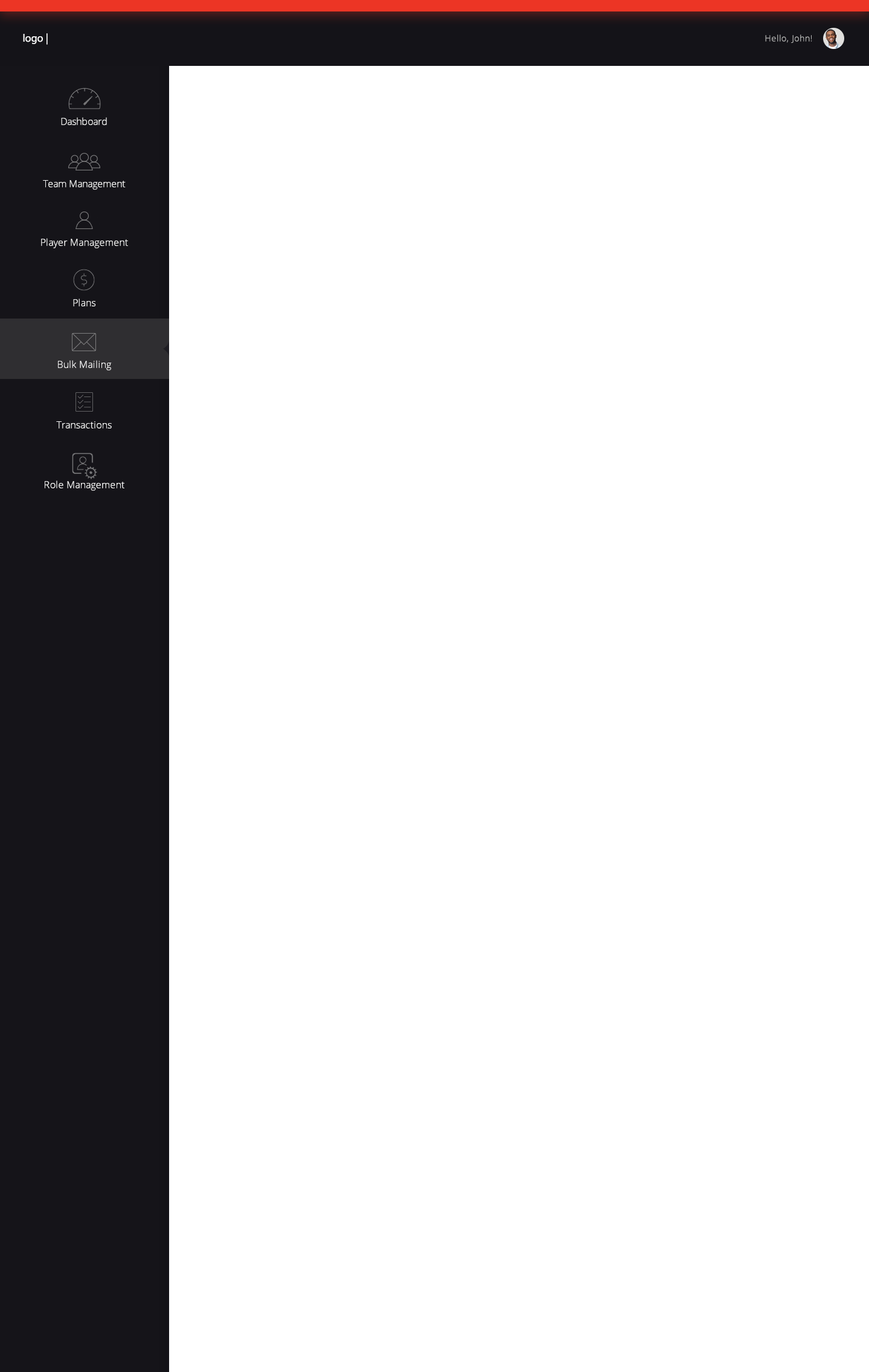
<style>
.page{position:relative;width:869px;height:1372px;background:#ffffff}
.page>*{position:absolute;margin:0}
.t1{font:10.9px "MyriadPro-Regular";color:#ffffff}
.t2{font:8.5px "OpenSans-Light";letter-spacing:0.06em;color:#bbbbbb}
.t3{font:9.7px "OpenSans-Light";color:#f6f6f6}
.t4{font:9.7px "OpenSans-Light";letter-spacing:0.02em;color:#f6f6f6}
</style>
<div class="page">
<p class="t1" style="left:23px;top:33px;width:25px;height:12px">logo |</p>
<p class="t2" style="left:766px;top:34px;width:47px;height:9px">Hello, John!</p>
<p class="t3" style="left:61px;top:117px;width:46px;height:8px">Dashboard</p>
<p class="t3" style="left:43px;top:180px;width:83px;height:10px">Team Management</p>
<p class="t4" style="left:41px;top:238px;width:87px;height:10px">Player Management</p>
<p class="t4" style="left:73px;top:298px;width:23px;height:8px">Plans</p>
<p class="t4" style="left:58px;top:360px;width:54px;height:10px">Bulk Mailing</p>
<p class="t4" style="left:56px;top:421px;width:56px;height:7px">Transactions</p>
<p class="t4" style="left:45px;top:480px;width:79px;height:11px">Role Management</p>
</div>
